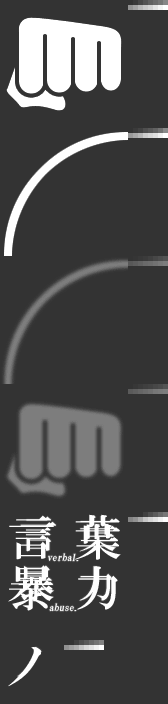
<style>
.page{position:relative;width:168px;height:704px;background:#333333}
.page>*{position:absolute;margin:0}
.t1{font:10px/14px "HGMinchoB";color:#ffffff;font-style:italic}
.t2{font:40px/30px "HGMinchoB";letter-spacing:-0.3em;color:#ffffff}
.t3{font:38px/30px "HGMinchoB";color:#ffffff}
.t4{font:10px/14px "HGMinchoB";letter-spacing:-0.1em;color:#ffffff;font-style:italic}
.t5{font:9.5px/14px "HGMinchoB";color:#ffffff;font-style:italic;scale:1.05 1}
.t6{font:10px/12px "HGMinchoB";color:#ffffff;font-style:italic}
.t7{font:38px/30px "HGMinchoB";letter-spacing:-0.4em;color:#ffffff}
.t8{font:38px "HGMinchoB";color:#ffffff}
</style>
<div class="page">
<p class="t1" style="left:20px;top:516px;width:96px;height:46px;text-align:center"><span class="t2"> </span><span class="t3">言 葉<br></span>verb<span class="t4">a</span><span class="t5">l</span><span class="t6">.</span></p>
<p class="t1" style="left:18px;top:565px;width:94px;height:47px;text-align:center"><span class="t7"> </span><span class="t3">暴 力<br></span>abuse.</p>
<p class="t8" style="left:17px;top:647px;width:25px;height:30px">ノ</p>
</div>
